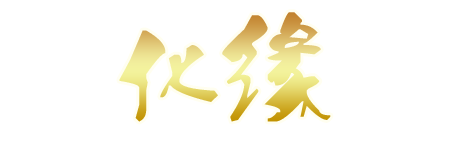
<style>
.page{position:relative;width:454px;height:142px;background:#ffffff}
.page>*{position:absolute;margin:0}
.t1{font:100px "Ò¶¸ùÓÑÌØÉ«¼òÌåÉý¼¶°æ"}
</style>
<div class="page">
<p class="t1" style="left:119px;top:12px;width:212px;height:110px">化缘</p>
</div>
